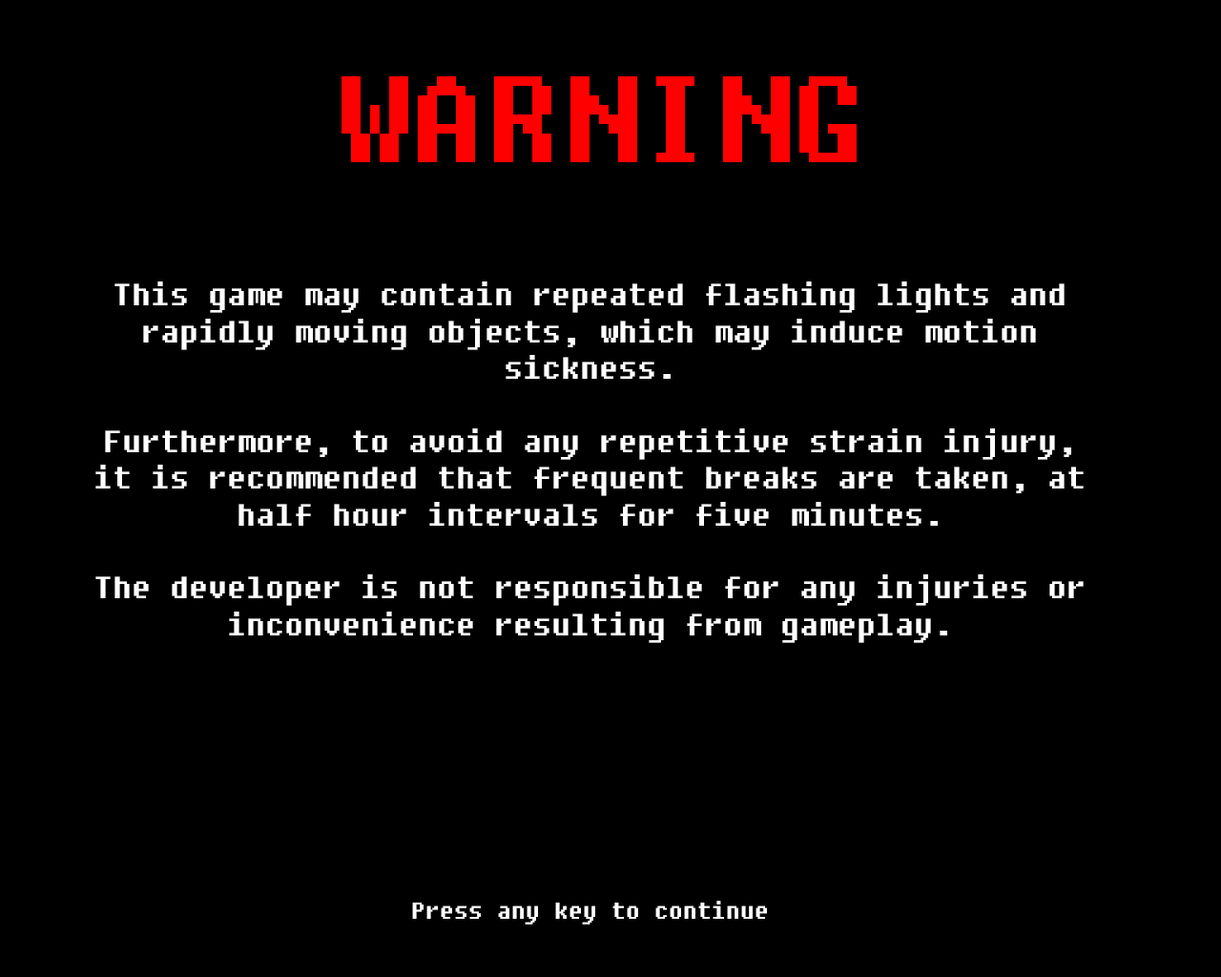
<style>
.page{position:relative;width:1221px;height:977px;background:#000000}
.page>*{position:absolute;margin:0}
.t1{font:122.1px "Fixedsys";color:#ff0000}
.t2{font:30.5px "Fixedsys";color:#ffffff}
.t3{font:22.9px "Fixedsys";color:#ffffff}
</style>
<div class="page">
<p class="t1" style="left:341px;top:76px;width:516px;height:86px">WARNING</p>
<p class="t2" style="left:95px;top:281px;width:989px;height:643px;text-align:center">This game may contain repeated flashing lights and<br>rapidly moving objects, which may induce motion<br>sickness.<br><br>Furthermore, to avoid any repetitive strain injury,<br>it is recommended that frequent breaks are taken, at<br>half hour intervals for five minutes.<br><br>The developer is not responsible for any injuries or<br>inconvenience resulting from gameplay.<br><br><span class="t3"><br><br><br><br><br><br><br><br>Press any key to continue</span></p>
</div>
